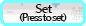
<style>
.page{position:relative;width:86px;height:26px;background:#77ffff}
.page>*{position:absolute;margin:0}
.t1{font:13.3px "AmiraParadiso";letter-spacing:-0.06em;color:#000000}
.t2{font:10.7px "AmiraParadiso";letter-spacing:-0.1em;color:#000000}
</style>
<div class="page">
<p class="t1" style="left:35px;top:4px;width:18px;height:9px;opacity:0.96">Set</p>
<p class="t2" style="left:19px;top:13px;width:48px;height:9px;opacity:0.96">(Press to set)</p>
</div>
